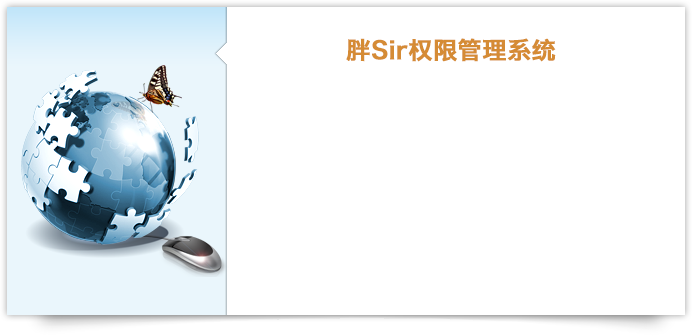
<style>
.page{position:relative;width:692px;height:336px;background:#ffffff}
.page>*{position:absolute;margin:0}
.t1{font:24px "HiraginoSansGB-W6";color:#d58b35;font-weight:bold}
</style>
<div class="page">
<p class="t1" style="left:346px;top:38px;width:210px;height:24px">胖Sir权限管理系统</p>
</div>
